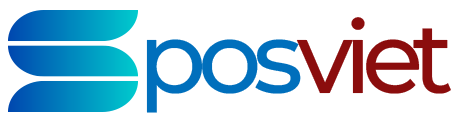
<style>
.page{position:relative;width:453px;height:120px;background:#ffffff}
.page>*{position:absolute;margin:0}
.t1{font:100px "MontserratRoman-Medium";letter-spacing:-0.06em;color:#8b0d0d}
.t2{font:100px "MontserratRoman-Medium";letter-spacing:-0.06em;color:#006fbc}
</style>
<div class="page">
<p class="t1" style="left:146px;top:17px;width:305px;height:96px"><span class="t2">pos</span>viet</p>
</div>
